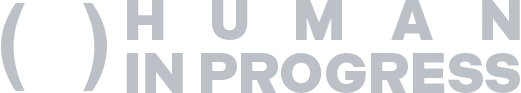
<style>
.page{position:relative;width:521px;height:93px;background:#ffffff}
.page>*{position:absolute;margin:0}
.t1{font:96px "Arial-BoldMT";letter-spacing:0.073em;color:#bbc1c6}
.t2{font:56px "Indivisible-Black";color:#bbc1c6}
.t3{font:56px "Indivisible-Black";letter-spacing:0.004em;color:#bbc1c6}
</style>
<div class="page">
<p class="t1" style="left:1px;top:3px;width:24px;height:88px">(</p>
<p class="t1" style="left:83px;top:3px;width:24px;height:88px">)</p>
<p class="t2" style="left:127px;top:0px;width:37px;height:40px">H</p>
<p class="t2" style="left:212px;top:0px;width:36px;height:40px">U</p>
<p class="t2" style="left:296px;top:0px;width:46px;height:40px">M</p>
<p class="t2" style="left:391px;top:0px;width:42px;height:40px">A</p>
<p class="t2" style="left:482px;top:0px;width:38px;height:40px">N</p>
<p class="t3" style="left:126px;top:53px;width:394px;height:40px">IN PROGRESS</p>
</div>
